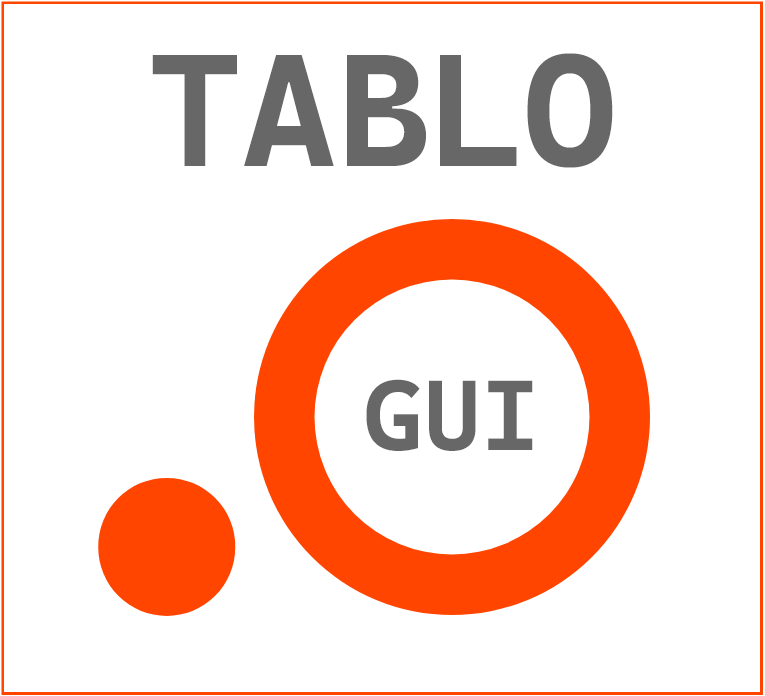
<style>
.page{position:relative;width:765px;height:696px;background:#ffffff}
.page>*{position:absolute;margin:0}
.t1{font:160px "CascadiaCodeRoman-Bold";color:#676767}
.t2{font:100px "CascadiaCodeRoman-Bold";color:#676767}
</style>
<div class="page">
<p class="t1" style="left:152px;top:53px;width:461px;height:115px">TABLO</p>
<p class="t2" style="left:366px;top:379px;width:167px;height:72px">GUI</p>
</div>
